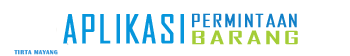
<style>
.page{position:relative;width:350px;height:56px;background:#ffffff}
.page>*{position:absolute;margin:0}
.t1{font:37.9px "AgencyFB-Reg";letter-spacing:0.05em;color:#0696dc;font-weight:bold}
.t2{font:17.6px "AgencyFB-Reg";letter-spacing:0.05em;color:#1180c8;font-weight:bold;scale:1.33 1}
.t3{font:17.6px "AgencyFB-Reg";letter-spacing:0.05em;color:#a4cd37;font-weight:bold;scale:2.14 1}
</style>
<div class="page">
<p class="t1" style="left:63px;top:14px;width:121px;height:30px">APLIKASI</p>
<p class="t2" style="left:192px;top:13px;width:105px;height:15px">PERMINTAAN</p>
<p class="t3" style="left:192px;top:30px;width:106px;height:15px">BARANG</p>
</div>
